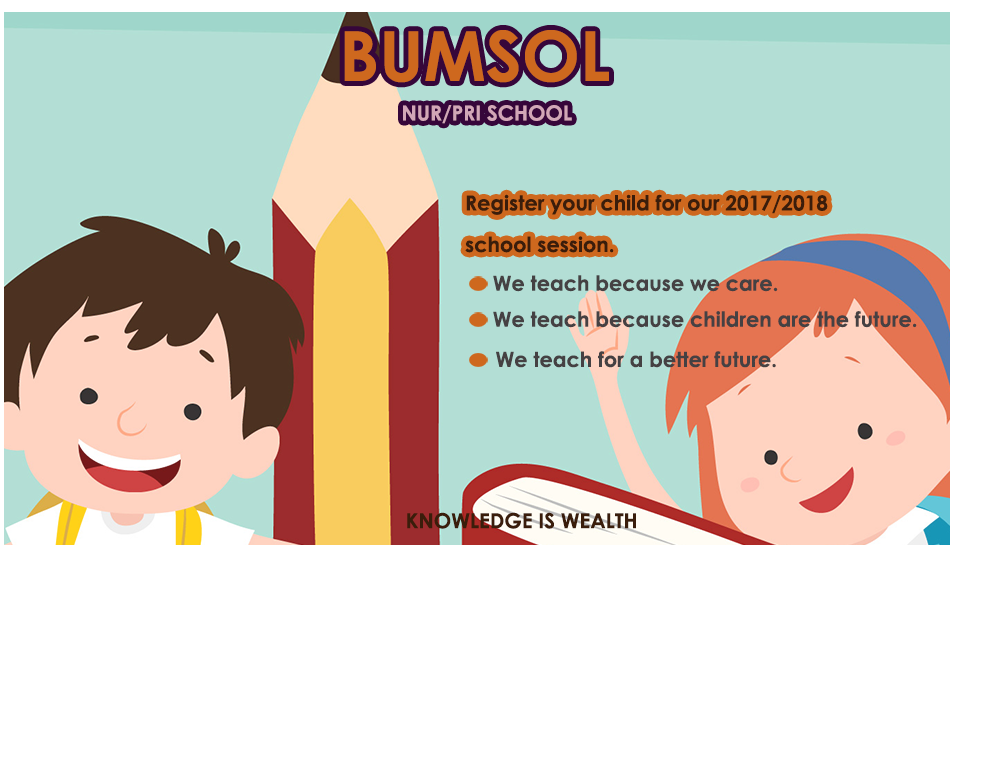
<style>
.page{position:relative;width:998px;height:768px;background:#ffffff}
.page>*{position:absolute;margin:0}
.t1{font:69.2px "CenturyGothic-Bold";color:#ce681e}
.t2{font:20.8px "CenturyGothic-Bold";color:#d2a6b7}
.t3{font:20.8px/41.5px "CenturyGothic-Bold";color:#3a1d0b}
.t4{font:20.8px "CenturyGothic-Bold";color:#454143}
.t5{font:20.8px "CenturyGothic-Bold";color:#3a1d0b}
</style>
<div class="page">
<p class="t1" style="left:344px;top:30px;width:265px;height:53px">BUMSOL</p>
<p class="t2" style="left:403px;top:105px;width:169px;height:19px">NUR/PRI SCHOOL</p>
<p class="t3" style="left:465px;top:194px;width:363px;height:59px">Register your child for our 2017/2018<br>school session.</p>
<p class="t4" style="left:493px;top:275px;width:285px;height:17px">We teach because we care.</p>
<p class="t4" style="left:493px;top:311px;width:424px;height:17px">We teach because children are the future.</p>
<p class="t4" style="left:496px;top:351px;width:280px;height:17px">We teach for a better future.</p>
<p class="t5" style="left:407px;top:512px;width:229px;height:17px">KNOWLEDGE IS WEALTH</p>
</div>
